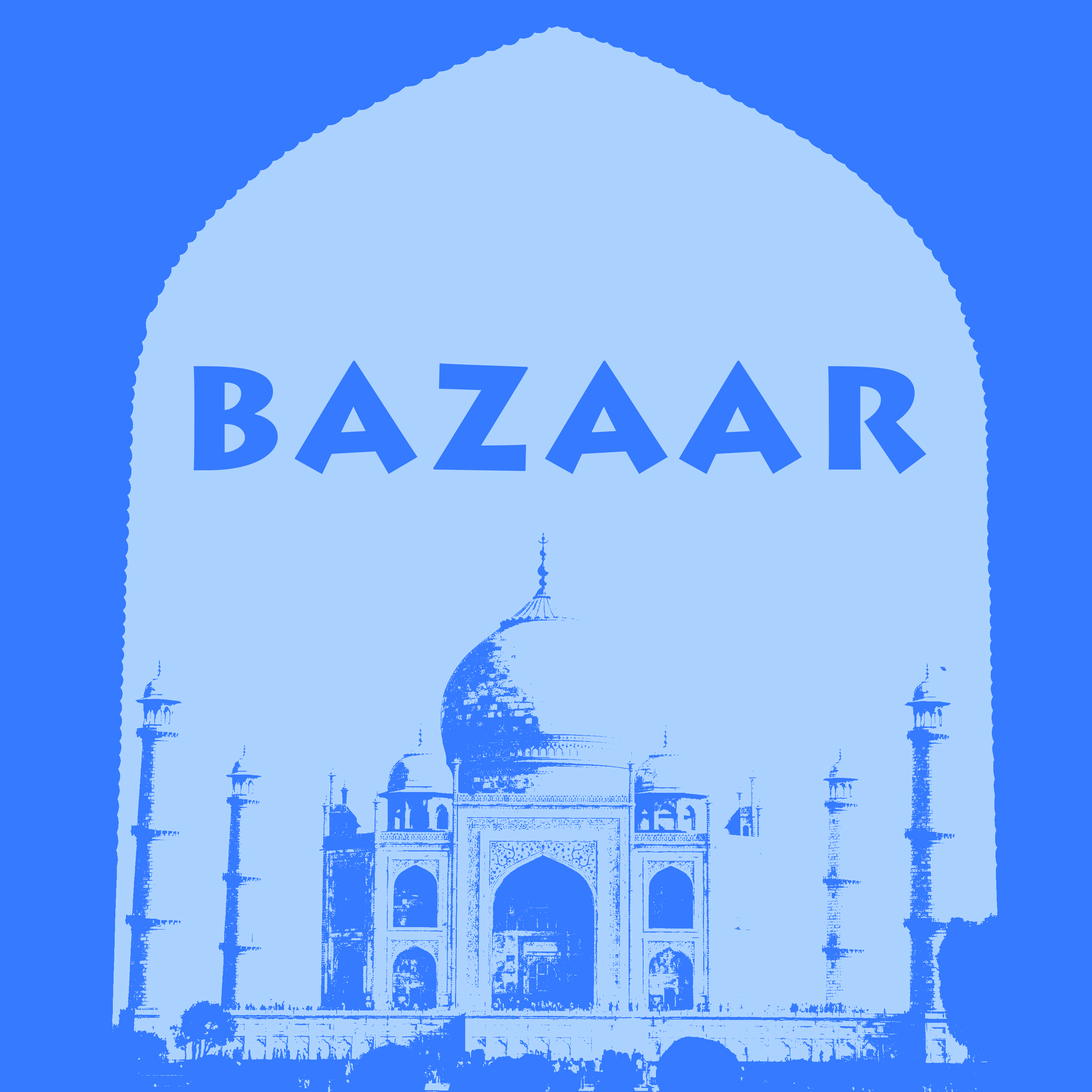
<style>
.page{position:relative;width:1092px;height:1092px;background:#abd2ff}
.page>*{position:absolute;margin:0}
.t1{font:145.6px "LithosPro-Black";letter-spacing:0.075em;color:#357aff}
</style>
<div class="page">
<p class="t1" style="left:194px;top:361px;width:732px;height:113px">BAZAAR</p>
</div>
